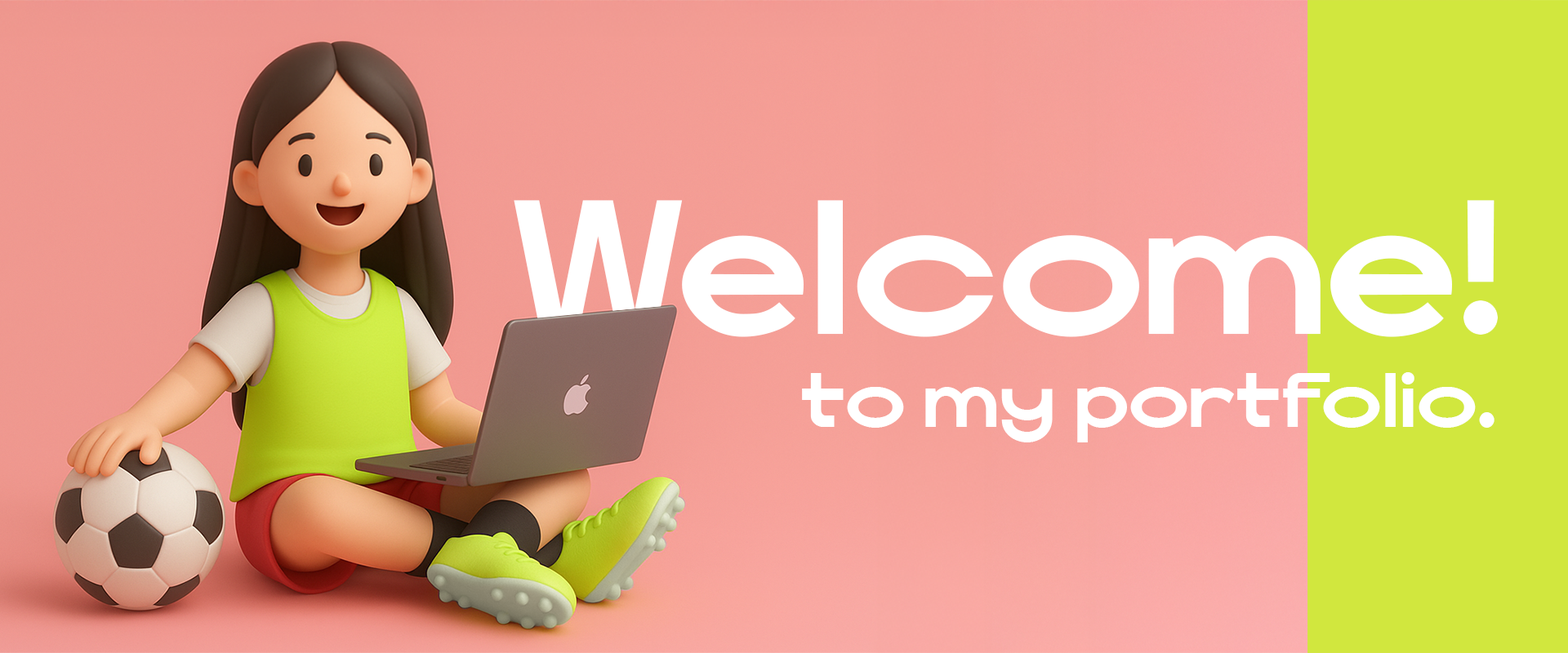
<style>
.page{position:relative;width:1568px;height:653px}
.page>*{position:absolute;margin:0}
.t1{font:190.8px "IFKica-Bold";color:#ffffff;scale:0.74 1}
.t2{font:76.9px "IFKica-Bold";color:#ffffff;scale:0.75 1}
</style>
<div class="page">
<p class="t1" style="left:514px;top:200px;width:984px;height:137px">Welcome!</p>
<p class="t2" style="left:802px;top:372px;width:692px;height:71px">to my portfolio.</p>
</div>
